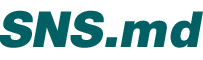
<style>
.page{position:relative;width:203px;height:60px;background:#ffffff}
.page>*{position:absolute;margin:0}
.t1{font:49.6px "Helvetica95-Black";color:#006064;font-style:italic}
</style>
<div class="page">
<p class="t1" style="left:0px;top:10px;width:203px;height:38px">SNS.md</p>
</div>
